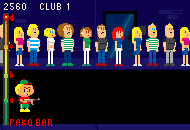
<style>
.page{position:relative;width:190px;height:130px;background:#000000}
.page>*{position:absolute;margin:0}
.t1{font:8px "Standard0758";color:#ffffff}
</style>
<div class="page">
<p class="t1" style="left:4px;top:3px;width:65px;height:7px">2560   CLUB 1</p>
</div>
